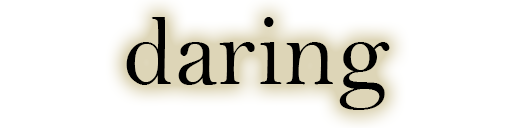
<style>
.page{position:relative;width:512px;height:128px;background:#ffffff}
.page>*{position:absolute;margin:0}
.t1{font:100px "BellMT";color:#000000}
</style>
<div class="page">
<p class="t1" style="left:126px;top:17px;width:264px;height:93px">daring</p>
</div>
